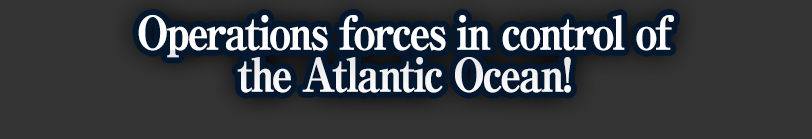
<style>
.page{position:relative;width:812px;height:139px;background:#333333}
.page>*{position:absolute;margin:0}
.t1{font:46px/42px "RyuminPro-ExBold";letter-spacing:-0.08em;color:#ffffff;font-weight:bold;scale:0.9 1}
</style>
<div class="page">
<p class="t1" style="left:138px;top:15px;width:536px;height:78px;text-align:center">Operations forces in control of<br>the Atlantic Ocean!</p>
</div>
